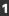
<style>
.page{position:relative;width:9px;height:16px;background:#333333}
.page>*{position:absolute;margin:0}
.t1{font:12.5px "RoundedMplus1c-ExtraBold";color:#ffffff}
</style>
<div class="page">
<p class="t1" style="left:2px;top:3px;width:6px;height:10px">1</p>
</div>
